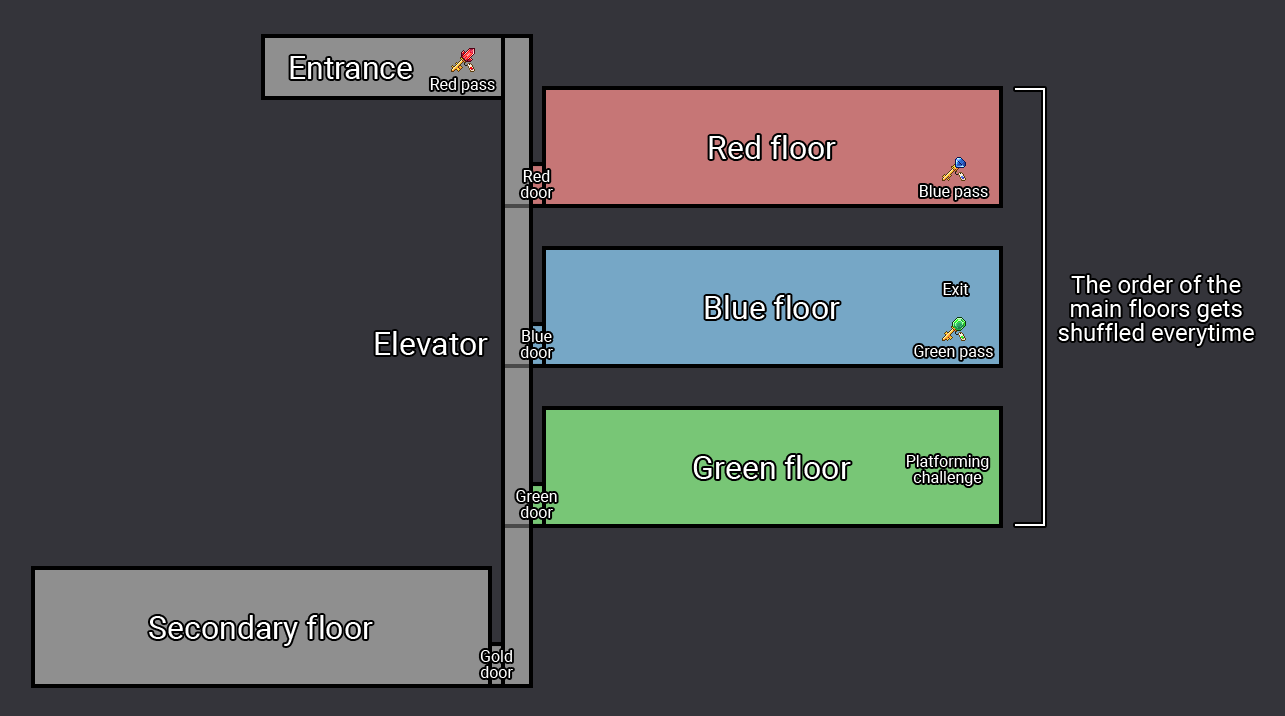
<style>
.page{position:relative;width:1285px;height:716px;background:#34343a}
.page>*{position:absolute;margin:0}
.t1{font:32px "Roboto-Regular";color:#ffffff}
.t2{font:16px "Roboto-Regular";color:#ffffff}
.t3{font:16px/16px "Roboto-Regular";color:#ffffff}
.t4{font:24px/24px "Roboto-Regular";color:#ffffff}
</style>
<div class="page">
<p class="t1" style="left:290px;top:56px;width:122px;height:23px">Entrance</p>
<p class="t2" style="left:430px;top:78px;width:65px;height:15px">Red pass</p>
<p class="t1" style="left:709px;top:135px;width:127px;height:24px">Red floor</p>
<p class="t3" style="left:520px;top:170px;width:33px;height:28px;text-align:center">Red<br>door</p>
<p class="t2" style="left:920px;top:185px;width:68px;height:15px">Blue pass</p>
<p class="t4" style="left:1058px;top:275px;width:196px;height:71px;text-align:center">The order of the main floors gets shuffled everytime</p>
<p class="t2" style="left:943px;top:283px;width:25px;height:12px">Exit</p>
<p class="t1" style="left:705px;top:295px;width:135px;height:24px">Blue floor</p>
<p class="t1" style="left:375px;top:331px;width:113px;height:24px">Elevator</p>
<p class="t3" style="left:520px;top:330px;width:33px;height:28px;text-align:center">Blue<br>door</p>
<p class="t2" style="left:914px;top:345px;width:79px;height:15px">Green pass</p>
<p class="t1" style="left:693px;top:455px;width:158px;height:24px">Green floor</p>
<p class="t3" style="left:907px;top:455px;width:82px;height:31px;text-align:center">Platforming<br>challenge</p>
<p class="t3" style="left:516px;top:490px;width:41px;height:28px;text-align:center">Green<br>door</p>
<p class="t1" style="left:149px;top:615px;width:224px;height:31px">Secondary floor</p>
<p class="t3" style="left:480px;top:650px;width:33px;height:28px;text-align:center">Gold<br>door</p>
</div>
